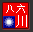
<style>
.page{position:relative;width:33px;height:32px;background:#f20000}
.page>*{position:absolute;margin:0}
.t1{font:10.4px "SimSun";color:#ffffff}
.t2{font:11.7px "SimSun";color:#ffffff}
</style>
<div class="page">
<p class="t1" style="left:6px;top:4px;width:19px;height:9px">八六</p>
<p class="t2" style="left:16px;top:15px;width:11px;height:12px">川</p>
</div>
